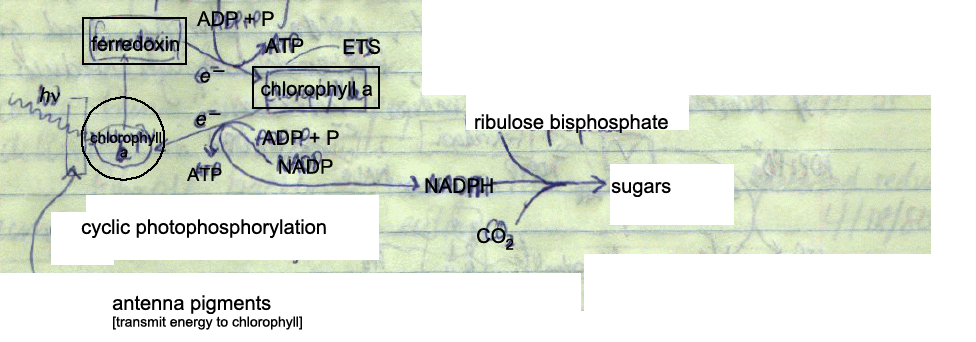
<style>
.page{position:relative;width:976px;height:342px;background:#ffffff}
.page>*{position:absolute;margin:0}
.t1{font:20px "ArialMT";color:#000000}
.t2{font:20px "Arial-ItalicMT";color:#000000}
.t3{font:15px "ArialMT";color:#000000}
.t4{font:15px "Arial-ItalicMT";color:#000000}
.t5{font:18px "ArialMT";color:#000000}
.t6{font:14px "ArialMT";color:#000000}
</style>
<div class="page">
<p class="t1" style="left:197px;top:11px;width:77px;height:15px">ADP + P</p>
<p class="t1" style="left:91px;top:36px;width:88px;height:16px">ferredoxin</p>
<p class="t1" style="left:265px;top:38px;width:39px;height:15px">ATP</p>
<p class="t1" style="left:343px;top:39px;width:38px;height:16px">ETS</p>
<p class="t2" style="left:200px;top:71px;width:11px;height:12px">e</p>
<p class="t2" style="left:213px;top:70px;width:12px;height:2px">–</p>
<p class="t2" style="left:39px;top:87px;width:11px;height:15px">h</p>
<p class="t1" style="left:261px;top:81px;width:112px;height:19px">chlorophyll a</p>
<p class="t2" style="left:209px;top:113px;width:12px;height:2px">–</p>
<p class="t2" style="left:196px;top:114px;width:11px;height:12px">e</p>
<p class="t1" style="left:475px;top:114px;width:193px;height:19px">ribulose bisphosphate</p>
<p class="t3" style="left:90px;top:132px;width:71px;height:14px">chlorophyll</p>
<p class="t1" style="left:262px;top:130px;width:77px;height:15px">ADP + P</p>
<p class="t4" style="left:120px;top:149px;width:8px;height:9px">a</p>
<p class="t1" style="left:279px;top:159px;width:54px;height:15px">NADP</p>
<p class="t5" style="left:187px;top:167px;width:35px;height:14px">ATP</p>
<p class="t1" style="left:425px;top:178px;width:68px;height:15px">NADPH</p>
<p class="t1" style="left:611px;top:182px;width:60px;height:15px">sugars</p>
<p class="t1" style="left:81px;top:219px;width:245px;height:19px">cyclic photophosphorylation</p>
<p class="t1" style="left:477px;top:228px;width:29px;height:16px">CO</p>
<p class="t3" style="left:506px;top:238px;width:8px;height:12px">2</p>
<p class="t6" style="left:112px;top:295px;width:190px;height:35px"><span class="t1">antenna pigments<br></span>[transmit energy to chlorophyll]</p>
</div>
